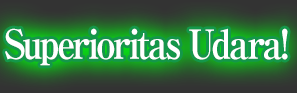
<style>
.page{position:relative;width:297px;height:93px}
.page>*{position:absolute;margin:0}
.t1{font:40px "RyuminPro-ExBold";letter-spacing:-0.08em;color:#ffffff;scale:0.9 1}
</style>
<div class="page">
<p class="t1" style="left:5px;top:28px;width:283px;height:38px">Superioritas Udara!</p>
</div>
